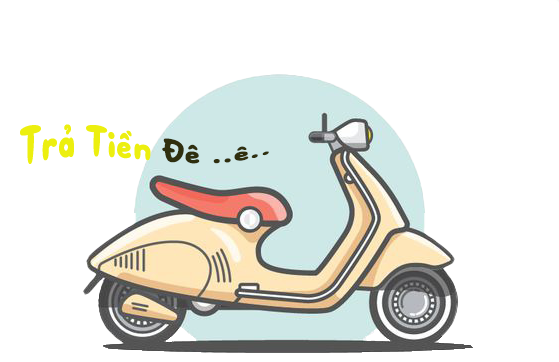
<style>
.page{position:relative;width:559px;height:362px;background:#ffffff}
.page>*{position:absolute;margin:0}
.t1{font:49.3px "SVN-Bublont";color:#ecef0f}
.t2{font:49.3px "SVN-Bublont";color:#2f2f0e}
</style>
<div class="page">
<p class="t1" style="left:20px;top:124px;width:249px;height:40px">Trả Tiền <span class="t2">Đê ..ê..</span></p>
</div>
